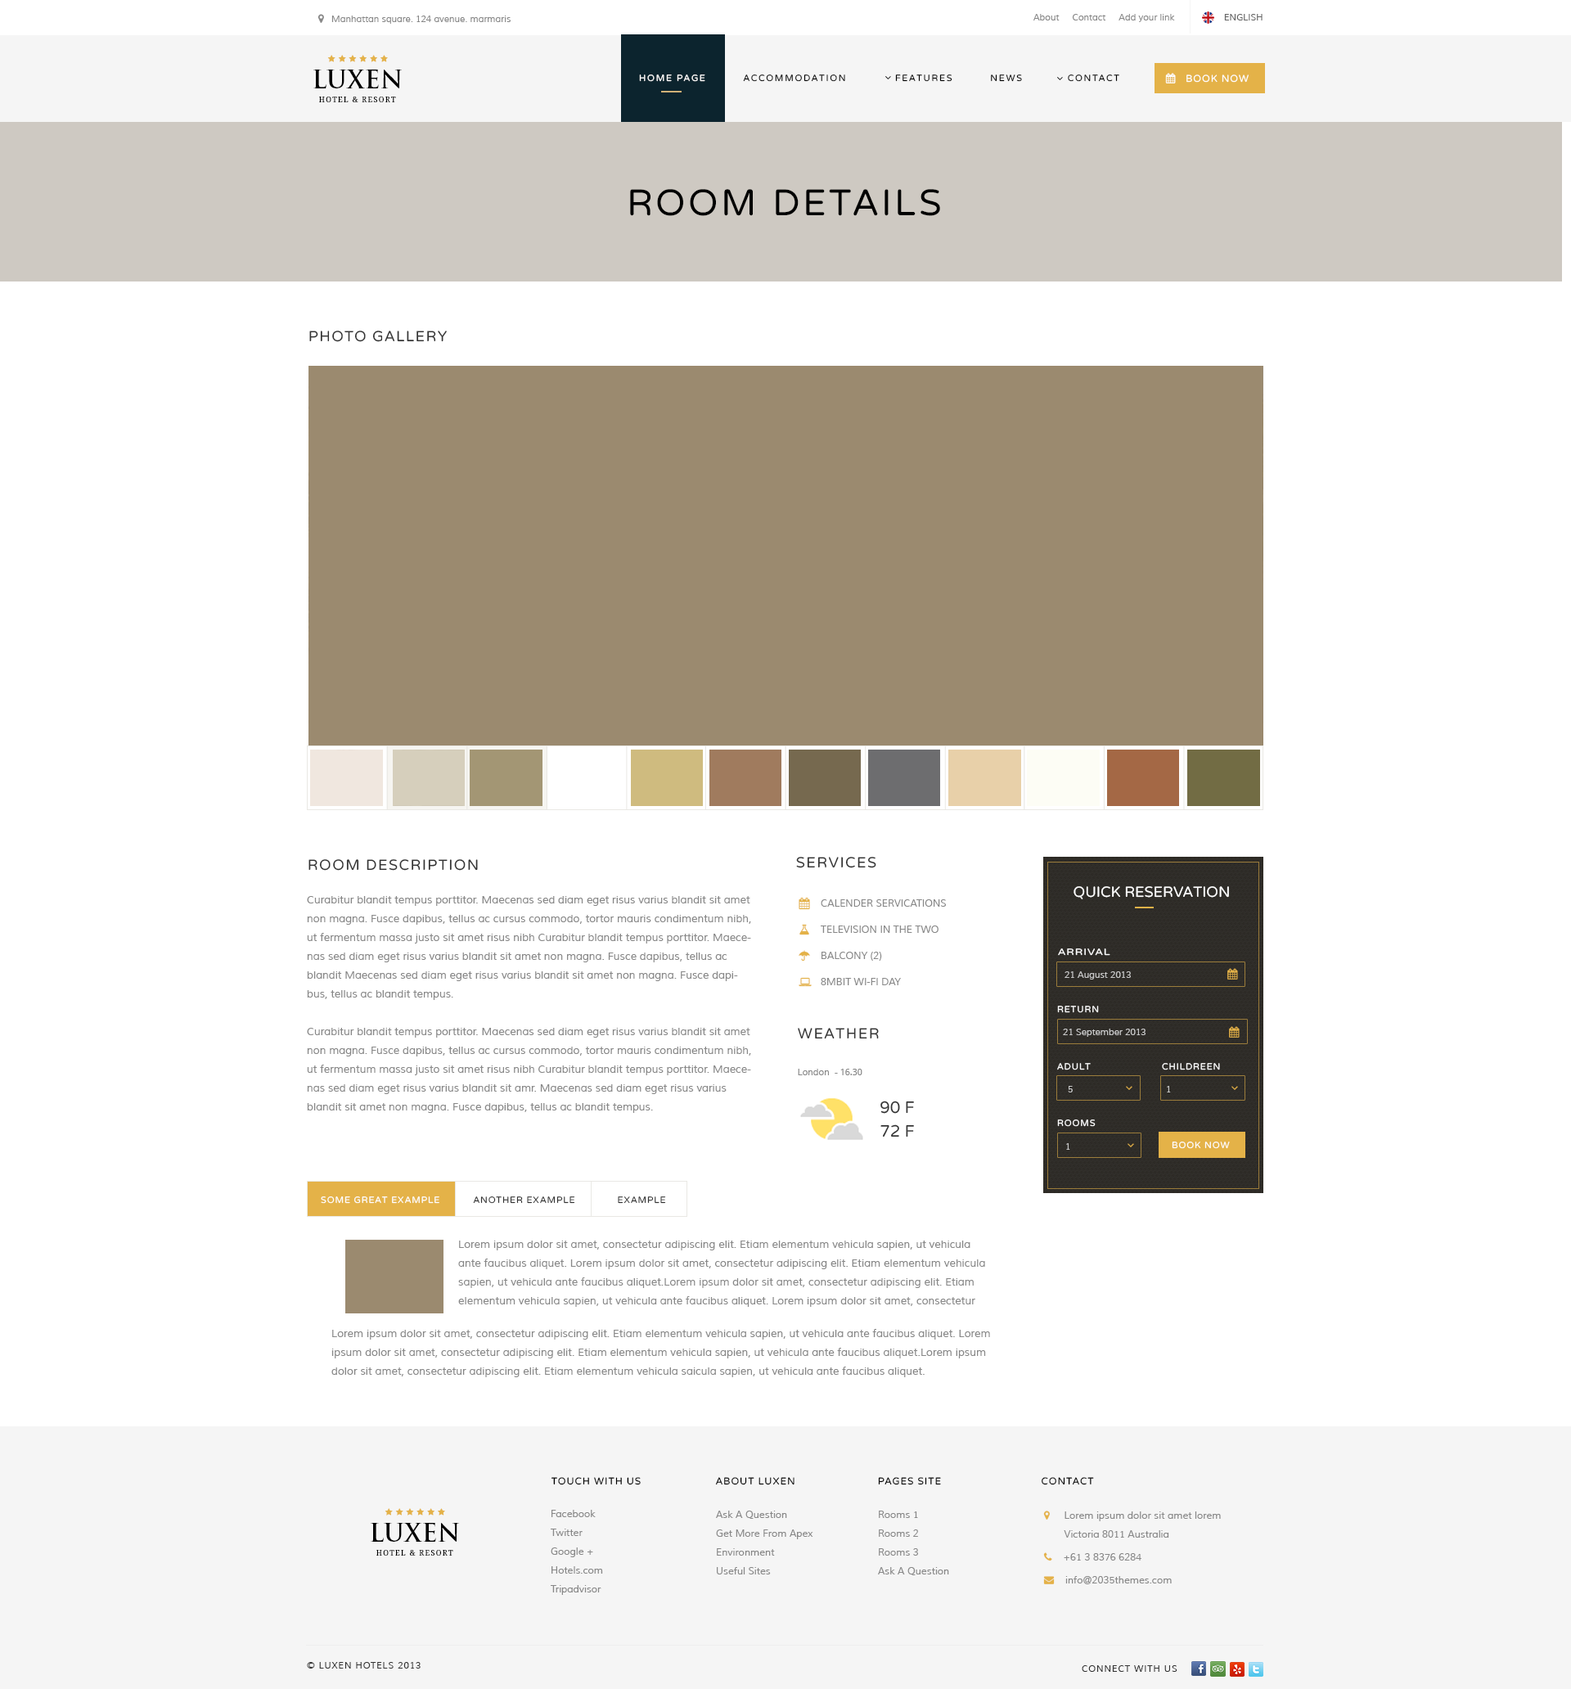
<style>
.page{position:relative;width:1571px;height:1689px;background:#ffffff}
.page>*{position:absolute;margin:0}
.t1{font:9px "Muli";color:#888888}
.t2{font:9px "Muli";color:#666666}
.t3{font:24.5px "TrajanPro-Bold";color:#000000;text-transform:uppercase}
.t4{font:9px "VarelaRound-Regular";letter-spacing:0.15em;color:#000000;text-transform:uppercase}
.t5{font:9.8px "VarelaRound-Regular";letter-spacing:0.08em;color:#ffffff;text-transform:uppercase}
.t6{font:7.4px "DroidSerif";letter-spacing:0.15em;color:#000000;text-transform:uppercase}
.t7{font:36.8px "VarelaRound-Regular";letter-spacing:0.08em;color:#000000;text-transform:uppercase}
.t8{font:14.7px "VarelaRound-Regular";letter-spacing:0.08em;color:#333333;text-transform:uppercase}
.t9{font:14.7px "VarelaRound-Regular";color:#ffffff;text-transform:uppercase}
.t10{font:10.6px/18.8px "Muli";color:#888888}
.t11{font:9.8px/26.2px "Muli";color:#888888;text-transform:uppercase}
.t12{font:9px "VarelaRound-Regular";letter-spacing:0.08em;color:#ffffff;text-transform:uppercase;scale:1.2 1}
.t13{font:9px "Muli";color:#c8c8c8}
.t14{font:9px "VarelaRound-Regular";letter-spacing:0.08em;color:#ffffff;text-transform:uppercase}
.t15{font:9px "DroidSans";color:#848484}
.t16{font:16.4px/23.7px "VarelaRound-Regular";color:#333333}
.t17{font:9px "VarelaRound-Regular";letter-spacing:0.08em;color:#333333;text-transform:uppercase}
.t18{font:9.8px "VarelaRound-Regular";letter-spacing:0.08em;color:#000000;text-transform:uppercase}
.t19{font:9.8px/18.8px "Muli";color:#888888}
.t20{font:9px "Muli";letter-spacing:0.08em;color:#333333;text-transform:uppercase}
</style>
<div class="page">
<p class="t1" style="left:331px;top:16px;width:180px;height:8px">Manhattan square. 124 avenue. marmaris</p>
<p class="t1" style="left:1033px;top:14px;width:142px;height:8px">About     Contact     Add your link</p>
<p class="t2" style="left:1224px;top:14px;width:38px;height:6px">ENGLISH</p>
<p class="t3" style="left:313px;top:70px;width:89px;height:18px">Luxen</p>
<p class="t4" style="left:639px;top:74px;width:480px;height:8px">HOME PAGE          ACCOMMODATION             FEATUREs          NEWS            CONTACT</p>
<p class="t5" style="left:1186px;top:74px;width:63px;height:9px">book now</p>
<p class="t6" style="left:319px;top:97px;width:77px;height:5px">Hotel &amp; Resort</p>
<p class="t7" style="left:630px;top:189px;width:310px;height:27px">room details</p>
<p class="t8" style="left:309px;top:331px;width:138px;height:11px">photo Gallery</p>
<p class="t8" style="left:796px;top:857px;width:80px;height:11px">services</p>
<p class="t8" style="left:308px;top:859px;width:170px;height:12px">Room description</p>
<p class="t9" style="left:1073px;top:886px;width:156px;height:13px">quick Reservation</p>
<p class="t10" style="left:307px;top:896px;width:444px;height:217px">Curabitur blandit tempus porttitor. Maecenas sed diam eget risus varius blandit sit amet non magna. Fusce dapibus, tellus ac cursus commodo, tortor mauris condimentum nibh, ut fermentum massa justo sit amet risus nibh Curabitur blandit tempus porttitor. Maecenas sed diam eget risus varius blandit sit amet non magna. Fusce dapibus, tellus ac blandit Maecenas sed diam eget risus varius blandit sit amet non magna. Fusce dapibus, tellus ac blandit tempus.<br><br>Curabitur blandit tempus porttitor. Maecenas sed diam eget risus varius blandit sit amet non magna. Fusce dapibus, tellus ac cursus commodo, tortor mauris condimentum nibh, ut fermentum massa justo sit amet risus nibh Curabitur blandit tempus porttitor. Maecenas sed diam eget risus varius blandit sit amr. Maecenas sed diam eget risus varius blandit sit amet non magna. Fusce dapibus, tellus ac blandit tempus.</p>
<p class="t11" style="left:821px;top:899px;width:125px;height:86px">Calender servıcatıons     <br>Televısıon ın the two<br>balcony (2)<br>8Mbıt Wı-fı day</p>
<p class="t12" style="left:1058px;top:948px;width:52px;height:8px">arrival</p>
<p class="t13" style="left:1064px;top:971px;width:67px;height:8px">21 August 2013</p>
<p class="t14" style="left:1057px;top:1006px;width:42px;height:7px">return</p>
<p class="t8" style="left:798px;top:1028px;width:81px;height:11px">weather</p>
<p class="t13" style="left:1063px;top:1028px;width:82px;height:9px">21 September 2013</p>
<p class="t1" style="left:798px;top:1069px;width:40px;height:6px">London  -</p>
<p class="t15" style="left:840px;top:1069px;width:22px;height:6px">16.30</p>
<p class="t14" style="left:1057px;top:1063px;width:34px;height:7px">adult</p>
<p class="t14" style="left:1162px;top:1063px;width:58px;height:7px">childreen</p>
<p class="t13" style="left:1068px;top:1086px;width:5px;height:6px">5</p>
<p class="t13" style="left:1167px;top:1086px;width:4px;height:6px">1</p>
<p class="t16" style="left:880px;top:1100px;width:34px;height:37px">90 F<br>72 F</p>
<p class="t14" style="left:1057px;top:1119px;width:39px;height:8px">Rooms</p>
<p class="t13" style="left:1066px;top:1143px;width:4px;height:7px">1</p>
<p class="t14" style="left:1172px;top:1141px;width:58px;height:8px">book now</p>
<p class="t14" style="left:321px;top:1196px;width:118px;height:8px">Some great example</p>
<p class="t17" style="left:473px;top:1196px;width:102px;height:8px">Another example</p>
<p class="t17" style="left:618px;top:1196px;width:48px;height:8px">Example</p>
<p class="t10" style="left:458px;top:1240px;width:527px;height:67px">Lorem ipsum dolor sit amet, consectetur adipiscing elit. Etiam elementum vehicula sapien, ut vehicula ante faucibus aliquet. Lorem ipsum dolor sit amet, consectetur adipiscing elit. Etiam elementum vehicula sapien, ut vehicula ante faucibus aliquet.Lorem ipsum dolor sit amet, consectetur adipiscing elit. Etiam elementum vehicula sapien, ut vehicula ante faucibus aliquet. Lorem ipsum dolor sit amet, consectetur adipiscing elit. Etiam elementum vehicula sapien, ut vehicula ante faorem ipsum dolor sit amet, consectetur adipiscing elit. Etiam elementum vehicula sapien, ut vehicula ante faucibus aliquet.</p>
<p class="t10" style="left:331px;top:1329px;width:659px;height:48px">Lorem ipsum dolor sit amet, consectetur adipiscing elit. Etiam elementum vehicula sapien, ut vehicula ante faucibus aliquet. Lorem ipsum dolor sit amet, consectetur adipiscing elit. Etiam elementum vehicula sapien, ut vehicula ante faucibus aliquet.Lorem ipsum dolor sit amet, consectetur adipiscing elit. Etiam elementum vehicula saicula sapien, ut vehicula ante faucibus aliquet.</p>
<p class="t18" style="left:551px;top:1477px;width:90px;height:8px">touch with us</p>
<p class="t18" style="left:715px;top:1477px;width:79px;height:8px">About Luxen</p>
<p class="t18" style="left:878px;top:1477px;width:63px;height:8px">Pages site</p>
<p class="t18" style="left:1042px;top:1477px;width:52px;height:8px">Contact</p>
<p class="t19" style="left:551px;top:1510px;width:52px;height:85px">Facebook<br>Twitter<br>Google +<br>Hotels.com<br>Tripadvisor</p>
<p class="t19" style="left:716px;top:1510px;width:97px;height:64px">Ask A Question<br>Get More From Apex<br>Environment<br>Useful Sites</p>
<p class="t19" style="left:878px;top:1510px;width:71px;height:65px">Rooms 1<br>Rooms 2<br>Rooms 3<br>Ask A Question<br>Get More From Apex<br>Environment<br>Useful Sites</p>
<p class="t3" style="left:371px;top:1523px;width:88px;height:18px">Luxen</p>
<p class="t6" style="left:376px;top:1550px;width:77px;height:5px">Hotel &amp; Resort</p>
<p class="t20" style="left:307px;top:1662px;width:114px;height:6px">© Luxen Hotels 2013</p>
<p class="t20" style="left:1082px;top:1665px;width:95px;height:7px">Connect with us</p>
</div>
